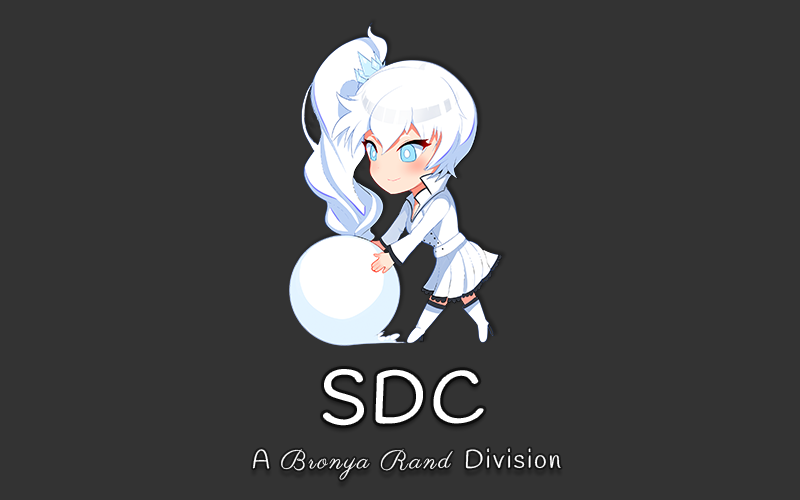
<style>
.page{position:relative;width:800px;height:500px;background:#333333}
.page>*{position:absolute;margin:0}
.t1{font:72px "Handlee-Regular";letter-spacing:0.075em;color:#ffffff}
.t2{font:26px "Handlee-Regular";letter-spacing:0.075em;color:#fefefe}
.t3{font:26px "Parisienne-Regular";letter-spacing:0.075em;color:#fefefe}
</style>
<div class="page">
<p class="t1" style="left:324px;top:370px;width:159px;height:55px">SDC</p>
<p class="t2" style="left:252px;top:449px;width:18px;height:20px">A</p>
<p class="t3" style="left:281px;top:449px;width:172px;height:31px">Bronya Rand</p>
<p class="t2" style="left:465px;top:448px;width:96px;height:21px">Division</p>
</div>
